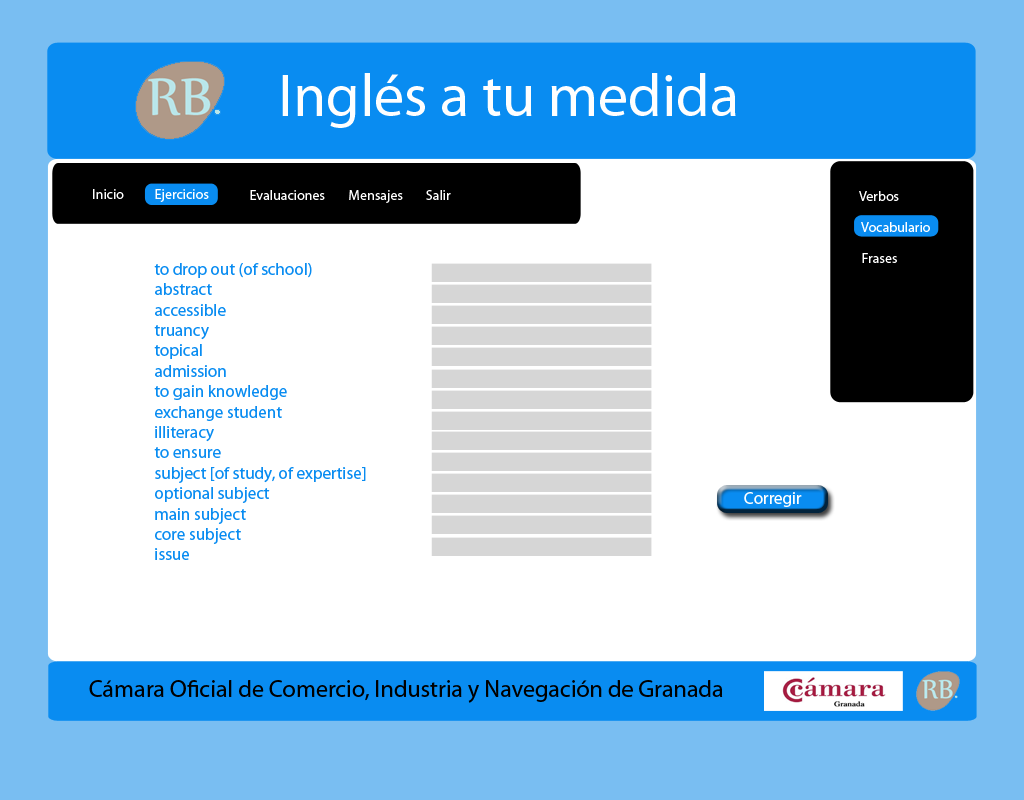
<style>
.page{position:relative;width:1024px;height:800px;background:#ffffff}
.page>*{position:absolute;margin:0}
.t1{font:60px "MyriadPro-Regular";color:#fefefe}
.t2{font:14px "MyriadPro-Regular";color:#ffffff}
.t3{font:17px "MyriadPro-Regular";color:#098cf1}
.t4{font:17px "MyriadPro-Regular";color:#fefefe}
.t5{font:24px "MyriadPro-Regular";color:#000000}
</style>
<div class="page">
<p class="t1" style="left:282px;top:73px;width:454px;height:55px">Inglés a tu medida</p>
<p class="t2" style="left:93px;top:189px;width:31px;height:10px">Inicio</p>
<p class="t2" style="left:155px;top:189px;width:54px;height:13px">Ejercicios</p>
<p class="t2" style="left:250px;top:190px;width:75px;height:10px">Evaluaciones</p>
<p class="t2" style="left:349px;top:190px;width:54px;height:13px">Mensajes</p>
<p class="t2" style="left:426px;top:190px;width:25px;height:10px">Salir</p>
<p class="t2" style="left:859px;top:191px;width:40px;height:10px">Verbos</p>
<p class="t2" style="left:861px;top:222px;width:69px;height:10px">Vocabulario</p>
<p class="t2" style="left:862px;top:253px;width:35px;height:10px">Frases</p>
<p class="t3" style="left:154px;top:263px;width:212px;height:297px">to drop out (of school)<br>abstract<br>accessible<br>truancy<br>topical<br>admission<br>to gain knowledge<br>exchange student<br>illiteracy<br>to ensure<br>subject [of study, of expertise]<br>optional subject<br>main subject<br>core subject<br>issue</p>
<p class="t4" style="left:744px;top:492px;width:58px;height:15px">Corregir</p>
<p class="t5" style="left:89px;top:680px;width:634px;height:23px">Cámara Oficial de Comercio, Industria y Navegación de Granada</p>
</div>
